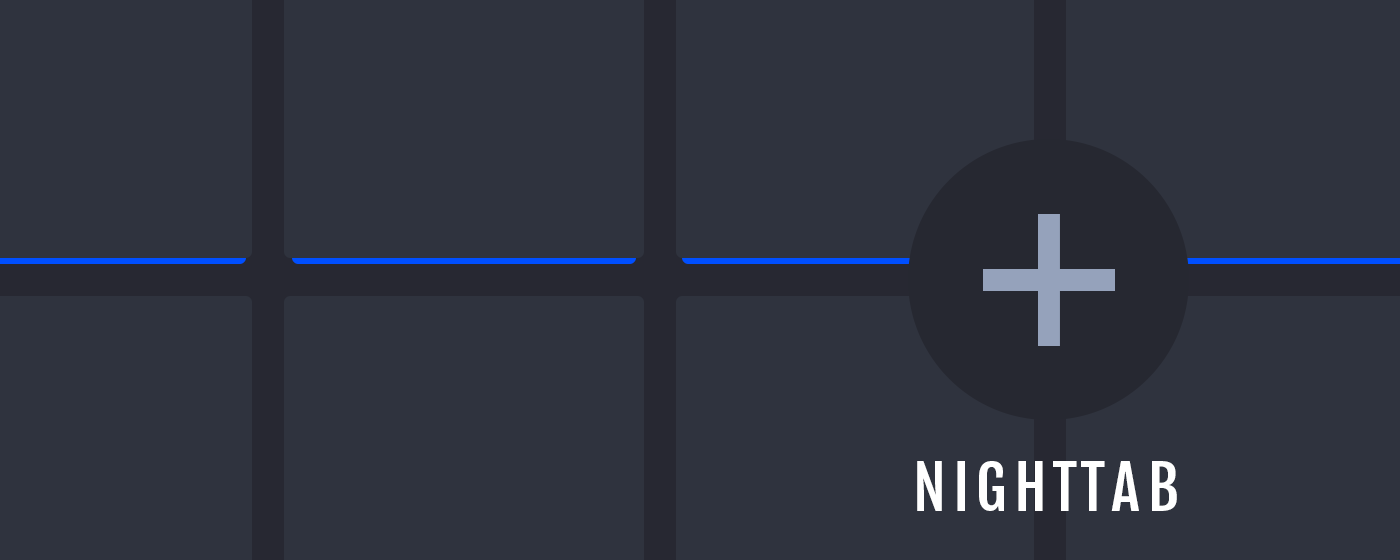
<style>
.page{position:relative;width:1400px;height:560px;background:#2f333e}
.page>*{position:absolute;margin:0}
.t1{font:60px "FjallaOne";letter-spacing:0.1em;color:#ffffff}
</style>
<div class="page">
<p class="t1" style="left:917px;top:461px;width:260px;height:50px">NIGHTTAB</p>
</div>
